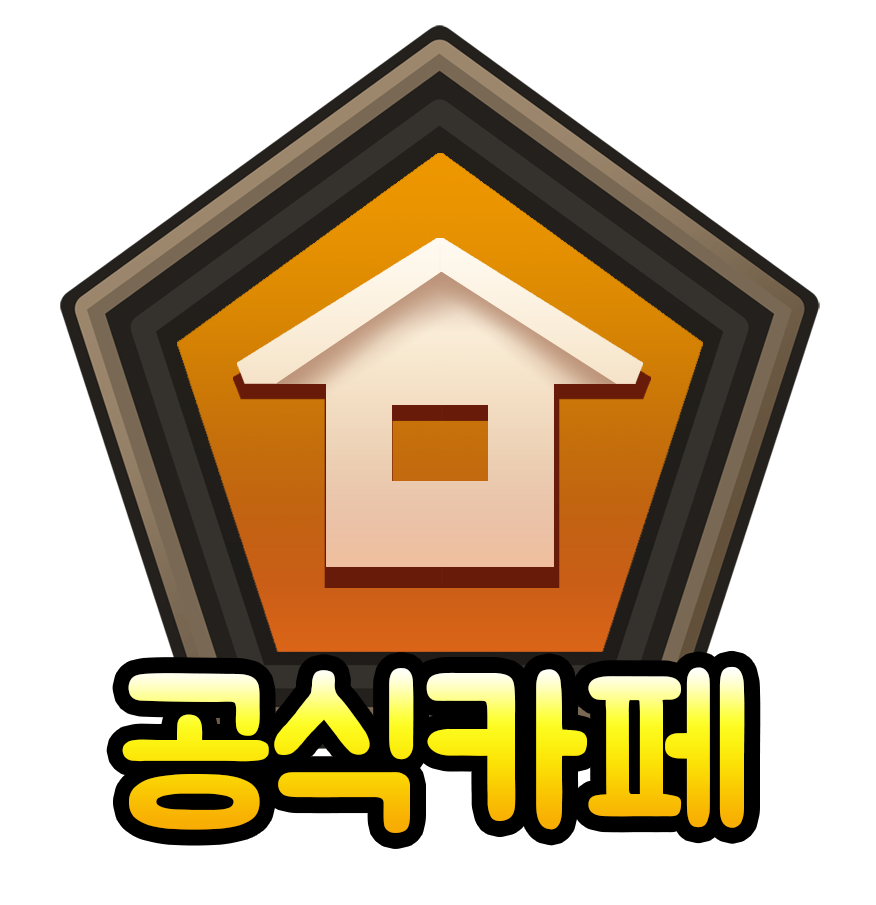
<style>
.page{position:relative;width:876px;height:905px;background:#ffffff}
.page>*{position:absolute;margin:0}
.t1{font:198.5px "BMJUAOTF"}
</style>
<div class="page">
<p class="t1" style="left:122px;top:666px;width:623px;height:167px">공식카페</p>
</div>
